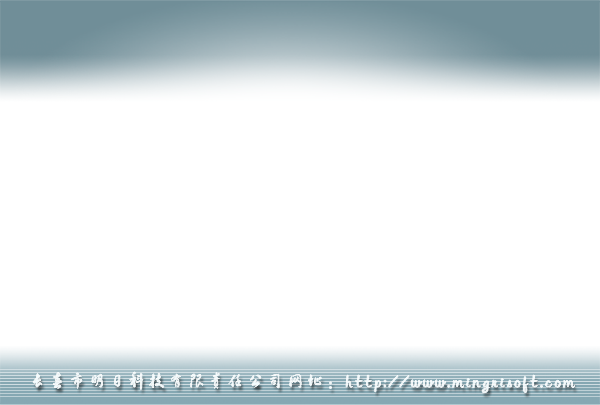
<style>
.page{position:relative;width:600px;height:405px;background:#ffffff}
.page>*{position:absolute;margin:0}
.t1{font:18px "FZHCJW--GB1-0";letter-spacing:0.1em;color:#f1fcff}
</style>
<div class="page">
<p class="t1" style="left:33px;top:372px;width:542px;height:21px">长春市明日科技有限责任公司网址：http://www.mingrisoft.com</p>
</div>
